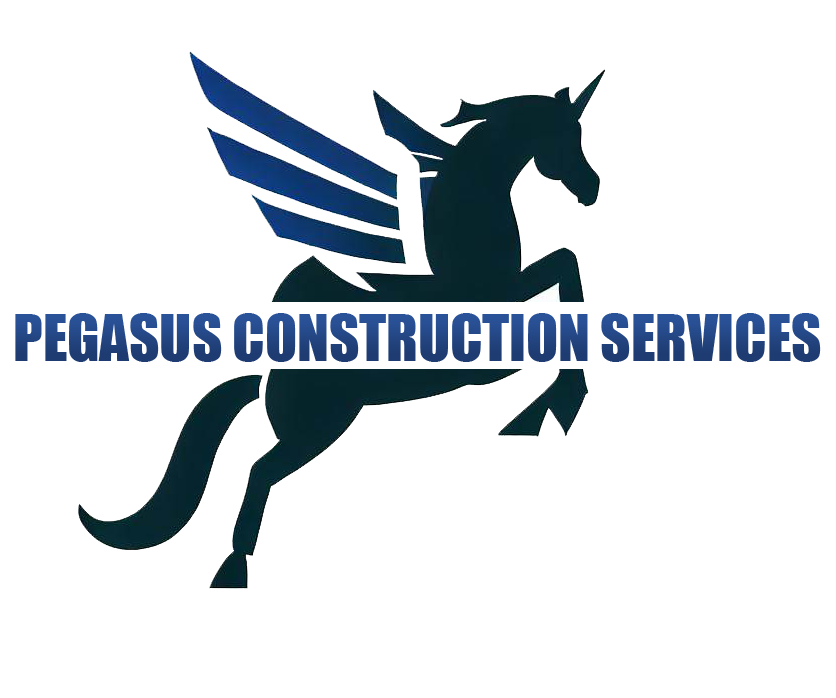
<style>
.page{position:relative;width:836px;height:698px;background:#ffffff}
.page>*{position:absolute;margin:0}
.t1{font:58.7px "Impact";color:#234683}
</style>
<div class="page">
<p class="t1" style="left:15px;top:313px;width:806px;height:49px">PEGASUS CONSTRUCTION SERVICES</p>
</div>
